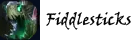
<style>
.page{position:relative;width:140px;height:40px;background:#ffffff}
.page>*{position:absolute;margin:0}
.t1{font:12px "VinerHandITC";color:#000000}
</style>
<div class="page">
<p class="t1" style="left:46px;top:11px;width:85px;height:19px">Fiddlesticks</p>
</div>
